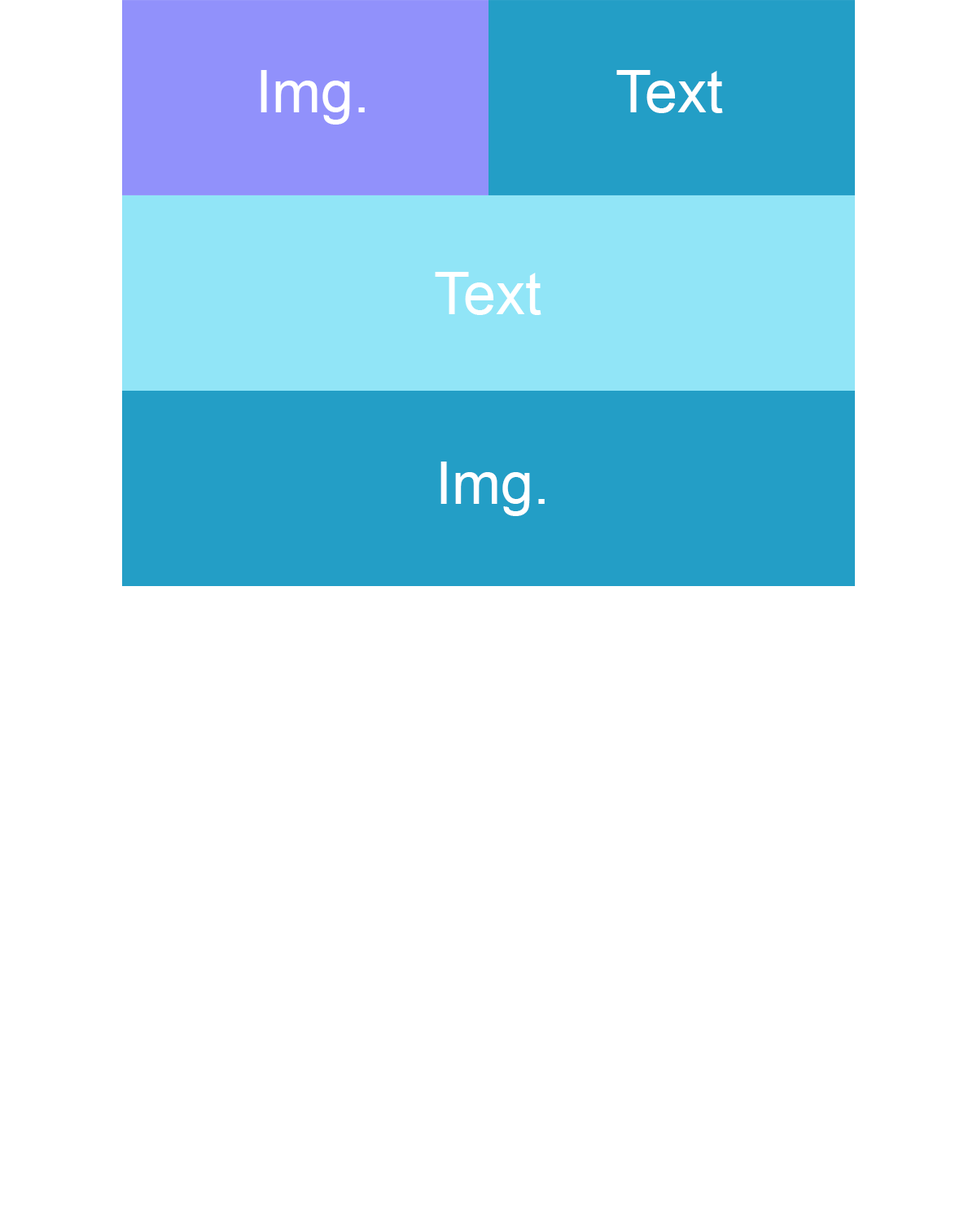
<style>
.page{position:relative;width:977px;height:1221px;background:#ffffff}
.page>*{position:absolute;margin:0}
.t1{font:58.6px "ArialMT";color:#ffffff}
</style>
<div class="page">
<p class="t1" style="left:260px;top:70px;width:105px;height:55px">Img.</p>
<p class="t1" style="left:616px;top:70px;width:107px;height:43px">Text</p>
<p class="t1" style="left:435px;top:272px;width:106px;height:43px">Text</p>
<p class="t1" style="left:440px;top:461px;width:105px;height:55px">Img.</p>
</div>
